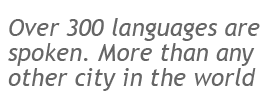
<style>
.page{position:relative;width:280px;height:100px;background:#ffffff}
.page>*{position:absolute;margin:0}
.t1{font:24px/25px "TrebuchetMS-Italic";color:#666666}
</style>
<div class="page">
<p class="t1" style="left:8px;top:18px;width:252px;height:73px">Over 300 languages are <br>spoken. More than any  <br>other city in the world</p>
</div>
